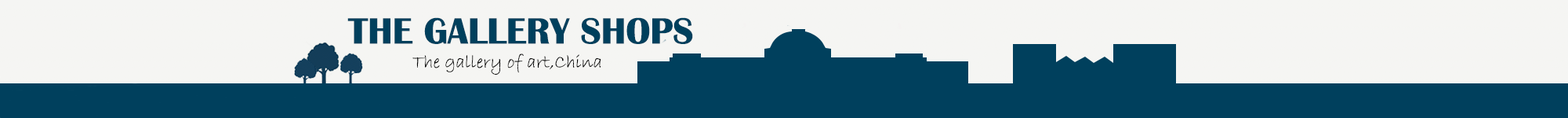
<style>
.page{position:relative;width:1568px;height:118px;background:#f5f5f3}
.page>*{position:absolute;margin:0}
.t1{font:37.6px "BritannicBold";color:#00405d}
.t2{font:18.8px "BradleyHandITC";color:#030303}
</style>
<div class="page">
<p class="t1" style="left:347px;top:17px;width:346px;height:27px">THE GALLERY SHOPS</p>
<p class="t2" style="left:412px;top:53px;width:189px;height:21px">The gallery of art,China</p>
</div>
